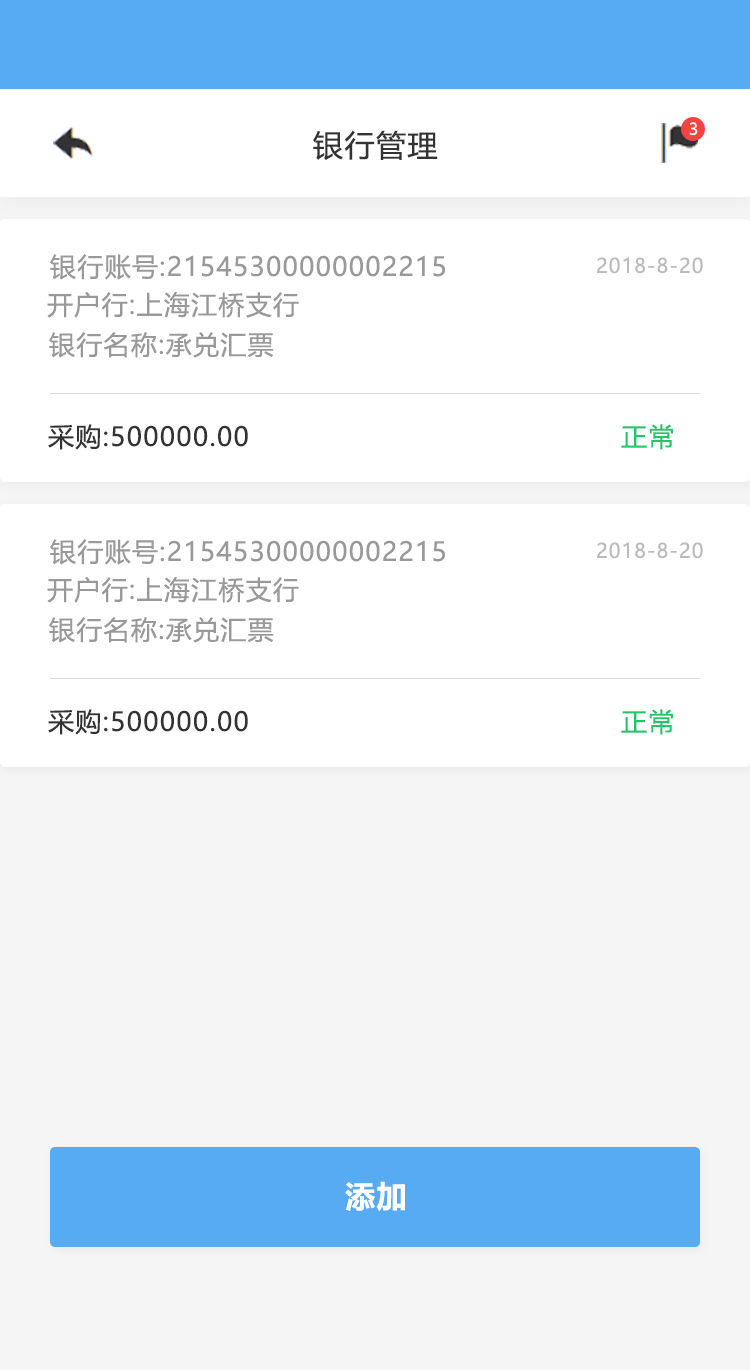
<style>
.page{position:relative;width:750px;height:1370px;background:#ffffff}
.page>*{position:absolute;margin:0}
.t1{font:16px "MicrosoftYaHeiUI";color:#ffffff}
.t2{font:30px "MicrosoftYaHeiUI";letter-spacing:0.05em;color:#333333}
.t3{font:26px "MicrosoftYaHeiUI";letter-spacing:0.05em;color:#999999}
.t4{font:20px "MicrosoftYaHeiUI";letter-spacing:0.05em;color:#bbbbbb}
.t5{font:26px "MicrosoftYaHeiUI";letter-spacing:0.05em;color:#333333}
.t6{font:26px "MicrosoftYaHeiUI";letter-spacing:0.05em;color:#1dc869}
.t7{font:30px "MicrosoftYaHeiUI-Bold";letter-spacing:0.05em;color:#ffffff}
</style>
<div class="page">
<p class="t1" style="left:689px;top:122px;width:9px;height:13px">3</p>
<p class="t2" style="left:313px;top:130px;width:125px;height:30px">银行管理</p>
<p class="t3" style="left:50px;top:254px;width:395px;height:26px">银行账号:21545300000002215</p>
<p class="t4" style="left:597px;top:257px;width:106px;height:17px">2018-8-20</p>
<p class="t3" style="left:47px;top:292px;width:252px;height:26px">开户行:上海江桥支行</p>
<p class="t3" style="left:49px;top:332px;width:225px;height:26px">银行名称:承兑汇票</p>
<p class="t5" style="left:48px;top:424px;width:200px;height:26px">采购:500000.00</p>
<p class="t6" style="left:621px;top:424px;width:52px;height:26px">正常</p>
<p class="t3" style="left:50px;top:539px;width:395px;height:26px">银行账号:21545300000002215</p>
<p class="t4" style="left:597px;top:542px;width:106px;height:17px">2018-8-20</p>
<p class="t3" style="left:47px;top:577px;width:252px;height:26px">开户行:上海江桥支行</p>
<p class="t3" style="left:49px;top:617px;width:225px;height:26px">银行名称:承兑汇票</p>
<p class="t5" style="left:48px;top:709px;width:200px;height:26px">采购:500000.00</p>
<p class="t6" style="left:621px;top:709px;width:52px;height:26px">正常</p>
<p class="t7" style="left:345px;top:1181px;width:60px;height:31px">添加</p>
</div>
